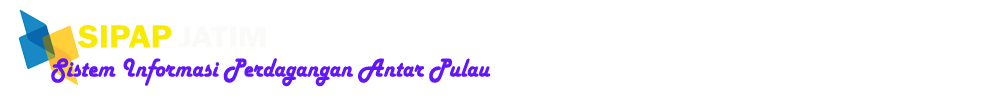
<style>
.page{position:relative;width:1000px;height:100px;background:#ffffff}
.page>*{position:absolute;margin:0}
.t1{font:32.9px "FranklinGothic-Demi";color:#f9ea02;scale:1.08 1}
.t2{font:30.6px "FranklinGothic-Demi";color:#fafaf9;scale:1.13 1}
.t3{font:27px "HarlowSolid";color:#6117fa;scale:0.89 1}
</style>
<div class="page">
<p class="t1" style="left:78px;top:25px;width:94px;height:23px">SIPAP</p>
<p class="t2" style="left:179px;top:26px;width:87px;height:22px">JATIM</p>
<p class="t3" style="left:51px;top:58px;width:440px;height:29px">Sistem Informasi Perdagangan Antar Pulau</p>
</div>
